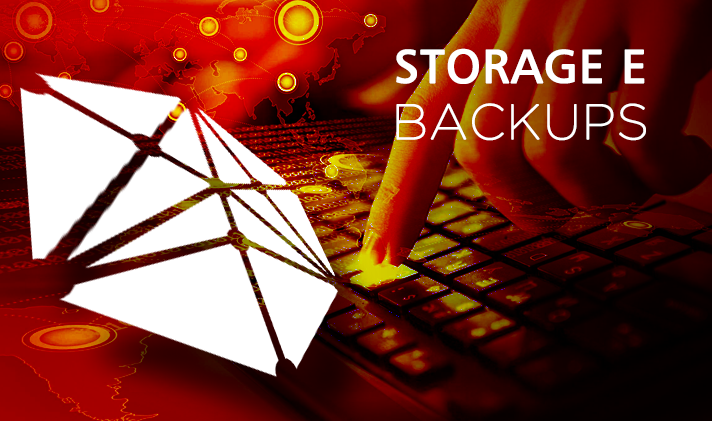
<style>
.page{position:relative;width:712px;height:421px}
.page>*{position:absolute;margin:0}
.t1{font:46.9px/56.3px "Humanist777BT-RomanB";letter-spacing:0.01em;color:#ffffff;font-weight:bold}
.t2{font:49px/56.3px "GothamThin";letter-spacing:0.01em;color:#ffffff;font-weight:bold}
</style>
<div class="page">
<p class="t1" style="left:396px;top:48px;width:250px;height:93px;text-align:center">STORAGE E<br><span class="t2">BACKUPS</span></p>
</div>
